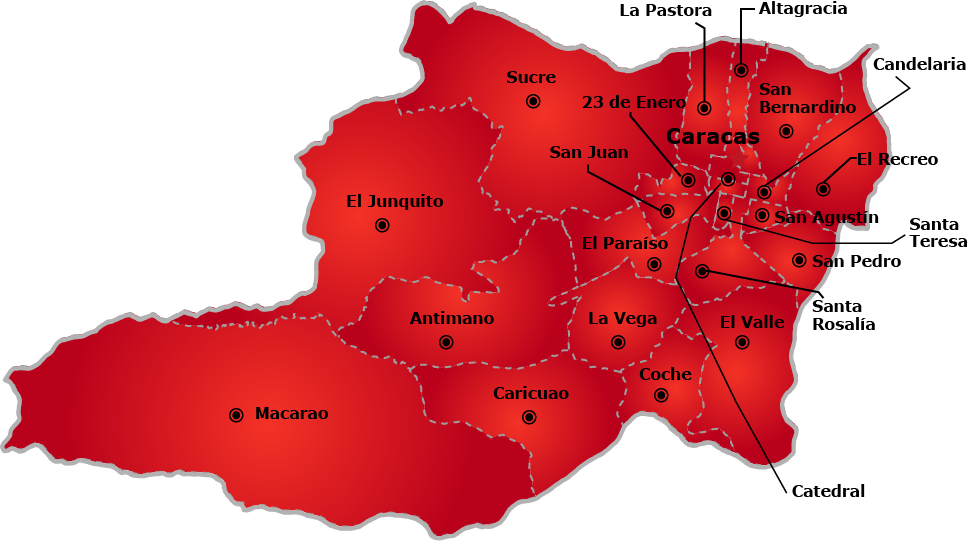
<style>
.page{position:relative;width:969px;height:542px;background:#ffffff}
.page>*{position:absolute;margin:0}
.t1{font:15.6px "Verdana-Bold";color:#000000}
.t2{font:15.6px/17.5px "Verdana-Bold";color:#000000}
.t3{font:21.4px "Verdana-Bold";color:#000000}
</style>
<div class="page">
<p class="t1" style="left:620px;top:4px;width:92px;height:12px">La Pastora</p>
<p class="t1" style="left:759px;top:1px;width:88px;height:16px">Altagracia</p>
<p class="t1" style="left:873px;top:57px;width:93px;height:13px">Candelaria</p>
<p class="t1" style="left:507px;top:71px;width:49px;height:12px">Sucre</p>
<p class="t2" style="left:759px;top:83px;width:97px;height:30px">San <br>Bernardino</p>
<p class="t1" style="left:582px;top:95px;width:104px;height:13px">23 de Enero</p>
<p class="t3" style="left:666px;top:128px;width:94px;height:16px">Caracas</p>
<p class="t1" style="left:550px;top:146px;width:78px;height:12px">San Juan</p>
<p class="t1" style="left:858px;top:152px;width:80px;height:13px">El Recreo</p>
<p class="t1" style="left:347px;top:194px;width:96px;height:16px">El Junquito</p>
<p class="t1" style="left:775px;top:211px;width:104px;height:15px">San Agustín</p>
<p class="t2" style="left:909px;top:218px;width:58px;height:29px">Santa<br>Teresa</p>
<p class="t1" style="left:583px;top:236px;width:85px;height:13px">El Paraíso</p>
<p class="t1" style="left:812px;top:254px;width:89px;height:13px">San Pedro</p>
<p class="t2" style="left:812px;top:300px;width:63px;height:30px">Santa<br>Rosalía</p>
<p class="t1" style="left:410px;top:311px;width:84px;height:13px">Antimano</p>
<p class="t1" style="left:589px;top:312px;width:68px;height:15px">La Vega</p>
<p class="t1" style="left:721px;top:315px;width:63px;height:13px">El Valle</p>
<p class="t1" style="left:639px;top:367px;width:53px;height:13px">Coche</p>
<p class="t1" style="left:493px;top:386px;width:76px;height:13px">Caricuao</p>
<p class="t1" style="left:256px;top:407px;width:72px;height:12px">Macarao</p>
<p class="t1" style="left:792px;top:484px;width:73px;height:13px">Catedral</p>
</div>
